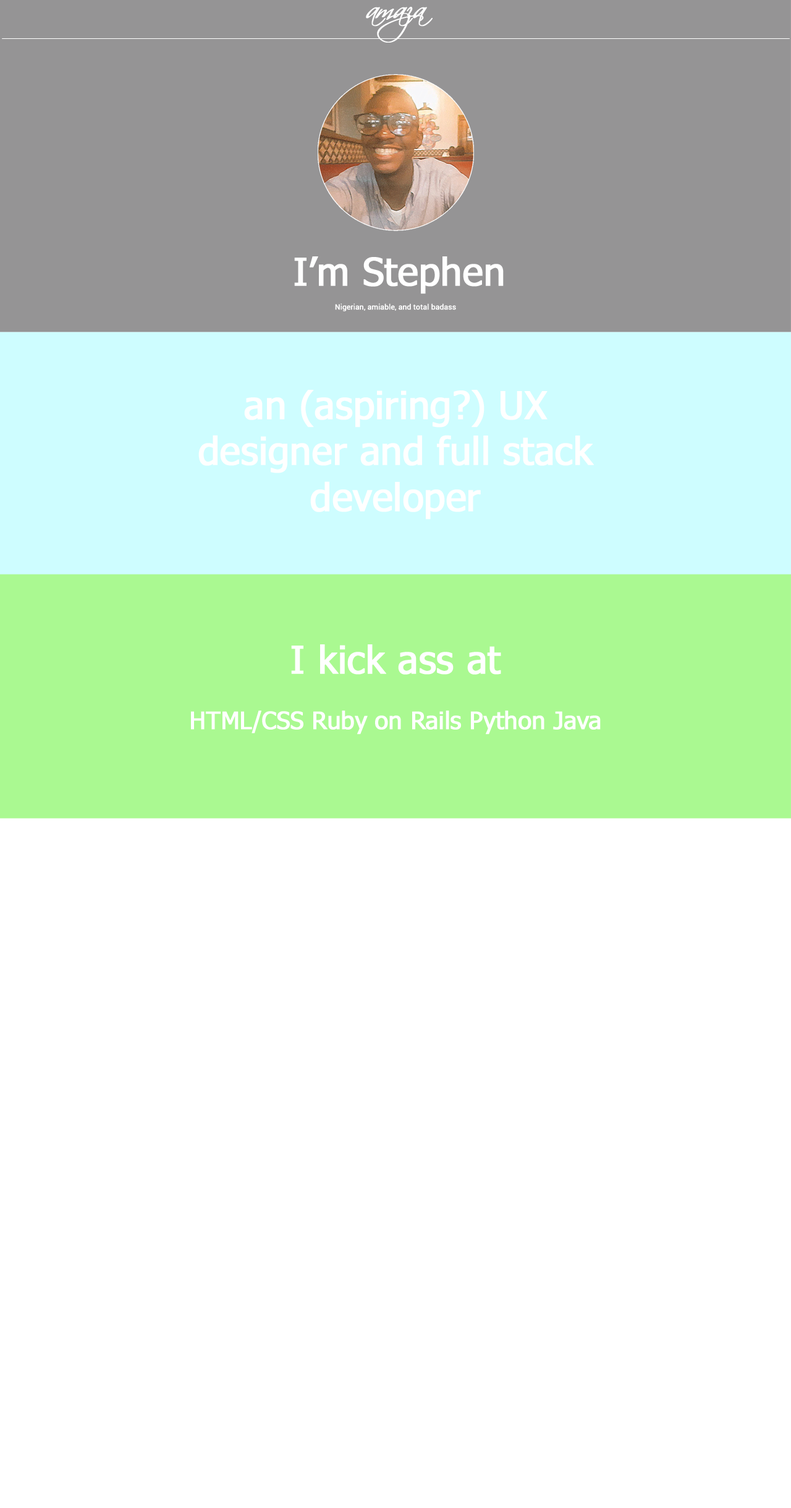
<style>
.page{position:relative;width:791px;height:1508px;background:#ffffff}
.page>*{position:absolute;margin:0}
.t1{font:29.7px "Scriptina";letter-spacing:-0.01em;color:#ffffff;font-weight:bold}
.t2{font:38.3px "Tahoma";letter-spacing:-0.01em;color:#ffffff;font-weight:bold}
.t3{font:7.4px "Roboto-Regular";letter-spacing:-0.01em;color:#ffffff;font-weight:bold}
.t4{font:24.1px/27.8px "Tahoma";letter-spacing:-0.01em;color:#ffffff;font-weight:bold}
.t5{font:38.3px/27.8px "Tahoma";letter-spacing:-0.01em;color:#ffffff;font-weight:bold}
</style>
<div class="page">
<p class="t1" style="left:366px;top:7px;width:66px;height:36px">amaza</p>
<p class="t2" style="left:294px;top:256px;width:209px;height:38px">I’m Stephen</p>
<p class="t3" style="left:335px;top:303px;width:121px;height:8px">Nigerian, amiable, and total badass</p>
<p class="t2" style="left:198px;top:390px;width:396px;height:130px;text-align:center">an (aspiring?) UX designer and full stack developer</p>
<p class="t4" style="left:191px;top:644px;width:409px;height:91px;text-align:center"><span class="t5">I kick ass at<br><br></span>HTML/CSS Ruby on Rails Python Java</p>
</div>
